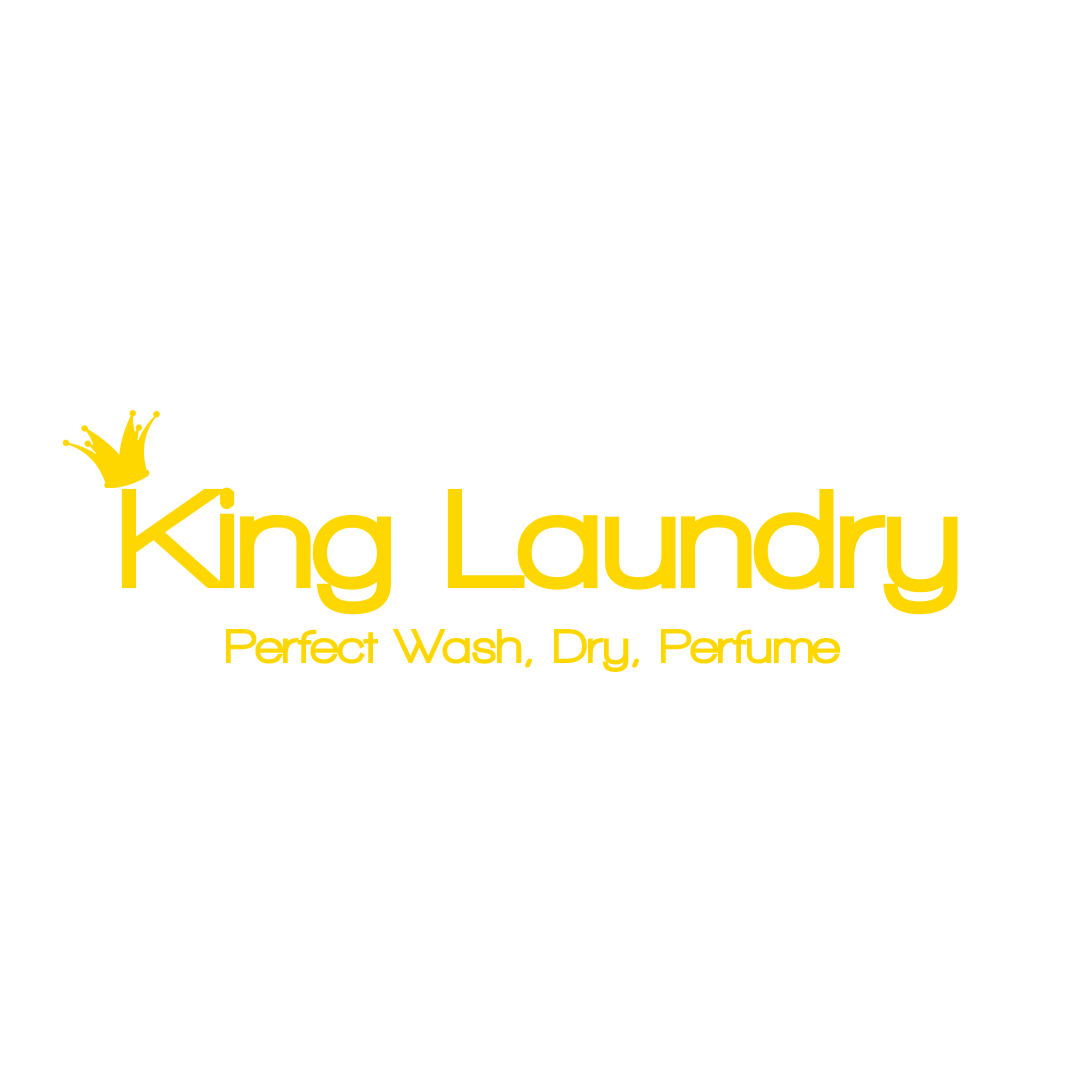
<style>
.page{position:relative;width:1080px;height:1080px;background:#ffffff}
.page>*{position:absolute;margin:0}
.t1{font:146.1px "WalkwayBlack";color:#ffd700}
.t2{font:50px "WalkwayBlack";color:#ffd700}
</style>
<div class="page">
<p class="t1" style="left:121px;top:487px;width:837px;height:128px">King Laundry</p>
<p class="t2" style="left:226px;top:629px;width:614px;height:43px">Perfect Wash, Dry, Perfume</p>
</div>
